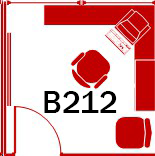
<style>
.page{position:relative;width:155px;height:156px;background:#ffffff}
.page>*{position:absolute;margin:0}
.t1{font:32px "FranklinGothic-Medium";color:#000000}
</style>
<div class="page">
<p class="t1" style="left:44px;top:91px;width:73px;height:22px">B212</p>
</div>
